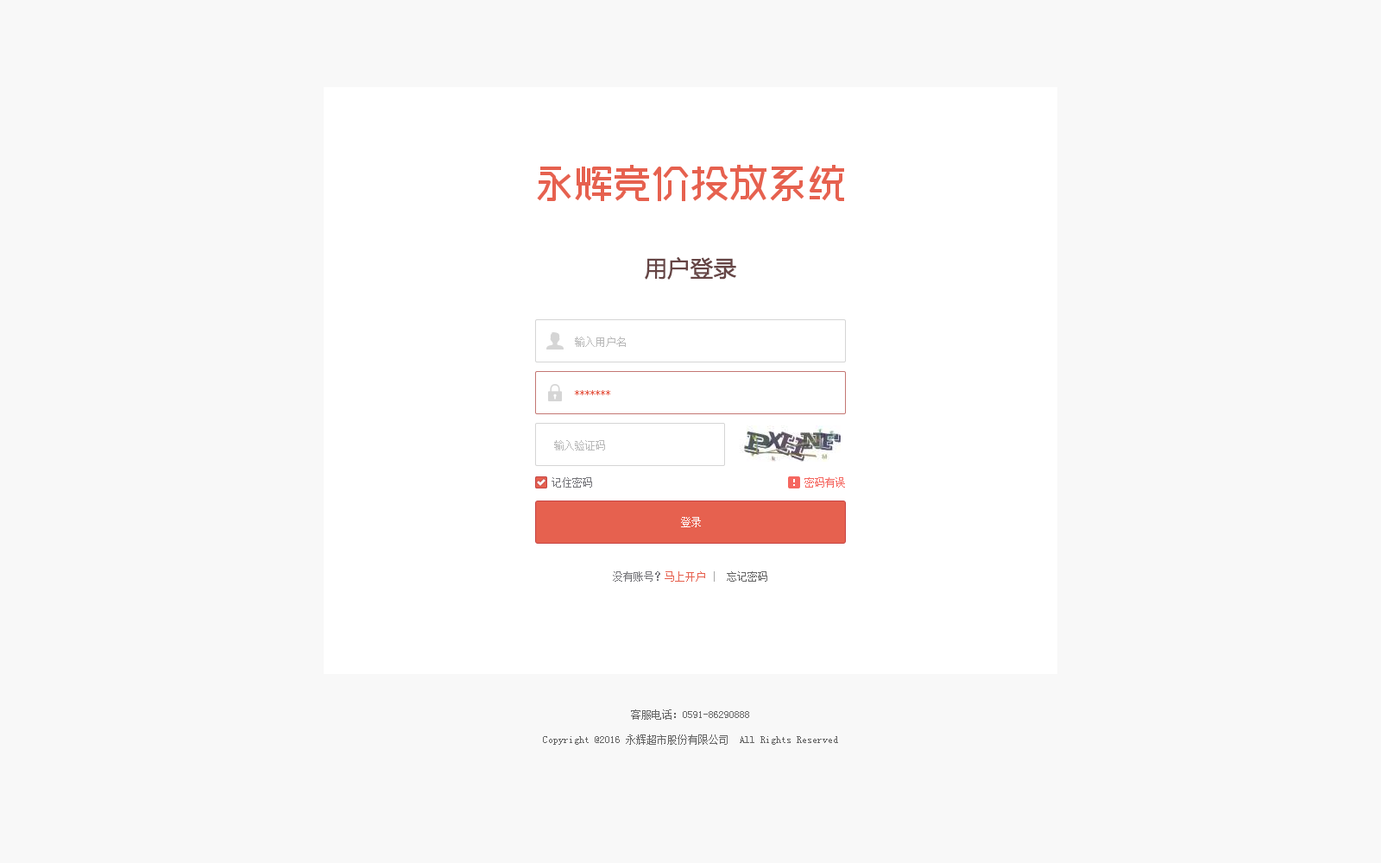
<style>
.page{position:relative;width:1381px;height:863px;background:#f8f8f8}
.page>*{position:absolute;margin:0}
.t1{font:22.4px "MicrosoftYaHei";color:#664545;font-weight:bold}
.t2{font:10.4px "SimSun";color:#bababa}
.t3{font:10.4px "SimSun";color:#e6614f}
.t4{font:10.4px "SimSun";color:#75757a}
.t5{font:10.4px "SimSun";color:#f56760}
.t6{font:10.4px "SimSun";color:#ffffff}
.t7{font:10.4px "SimSun";color:#a8a8a8}
.t8{font:10.4px "SimSun";color:#666666}
</style>
<div class="page">
<p class="t1" style="left:645px;top:256px;width:91px;height:24px">用户登录</p>
<p class="t2" style="left:575px;top:337px;width:51px;height:10px">输入用户名</p>
<p class="t3" style="left:575px;top:390px;width:35px;height:5px">*******</p>
<p class="t2" style="left:554px;top:440px;width:51px;height:11px">输入验证码</p>
<p class="t4" style="left:552px;top:477px;width:40px;height:11px">记住密码</p>
<p class="t4" style="left:552px;top:477px;width:40px;height:11px">记住密码</p>
<p class="t5" style="left:805px;top:477px;width:40px;height:11px">密码有误</p>
<p class="t6" style="left:681px;top:517px;width:20px;height:10px">登录</p>
<p class="t4" style="left:613px;top:571px;width:154px;height:11px">没有账号？<span class="t3">马上开户 </span><span class="t7">| </span><span class="t8"> 忘记密码</span></p>
<p class="t8" style="left:631px;top:710px;width:118px;height:10px">客服电话：0591-86290888</p>
<p class="t8" style="left:543px;top:735px;width:295px;height:10px">Copyright @2016 永辉超市股份有限公司  All Rights Reserved</p>
</div>
